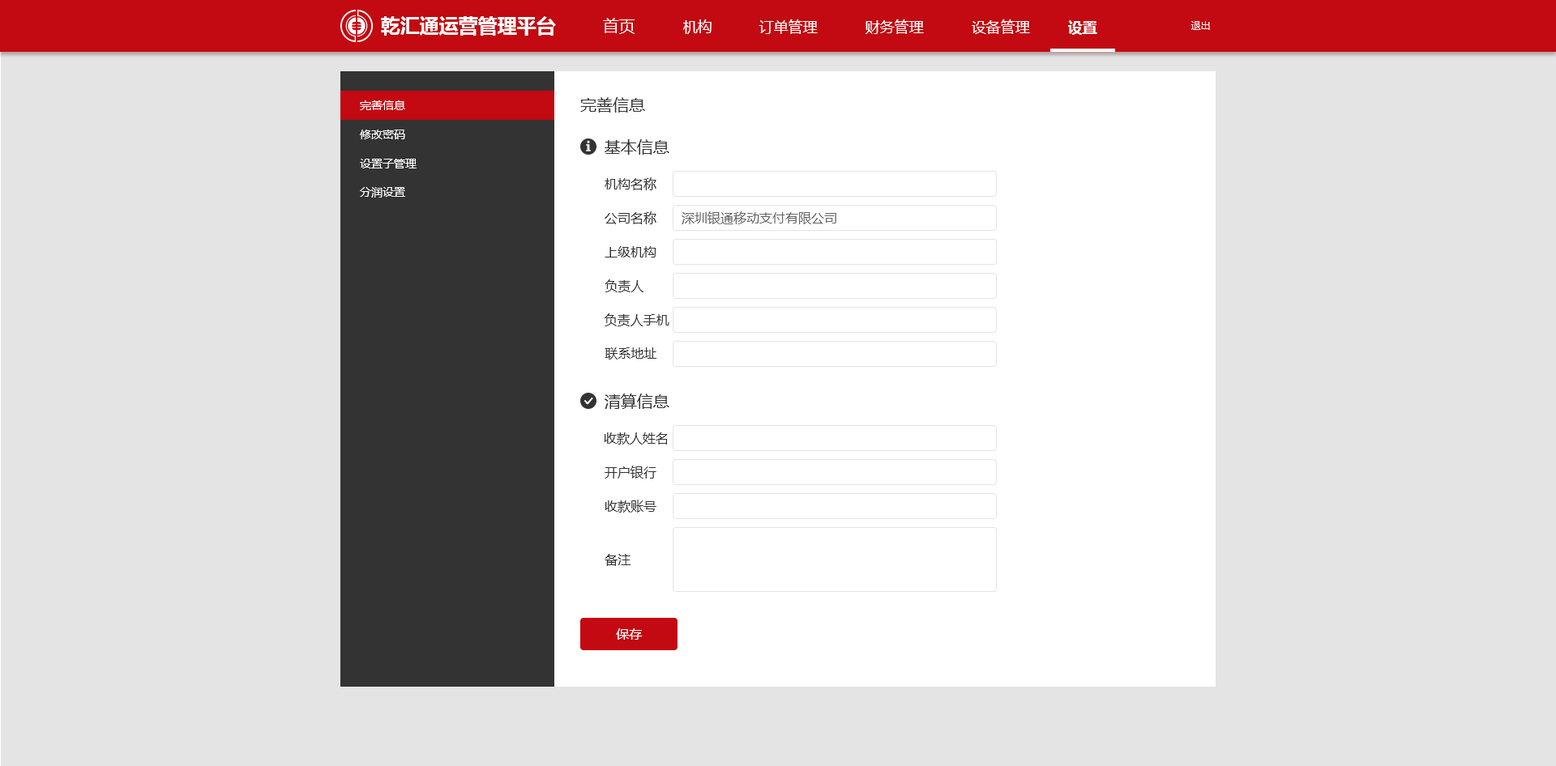
<style>
.page{position:relative;width:1556px;height:766px;background:#e4e4e4}
.page>*{position:absolute;margin:0}
.t1{font:19.4px "MicrosoftYaHei-Bold";color:#ffffff}
.t2{font:16.2px "MicrosoftYaHei";color:#ffffff}
.t3{font:14.6px "MicrosoftYaHei";color:#ffffff}
.t4{font:14.6px "MicrosoftYaHei-Bold";color:#ffffff}
.t5{font:9.7px "MicrosoftYaHei";color:#ffffff}
.t6{font:11.3px "MicrosoftYaHei";color:#ffffff}
.t7{font:16.2px "MicrosoftYaHei";color:#333333}
.t8{font:13px "MicrosoftYaHei";color:#333333}
.t9{font:13px "MicrosoftYaHei";color:#666666}
.t10{font:13px "MicrosoftYaHei";color:#ffffff}
</style>
<div class="page">
<p class="t1" style="left:381px;top:16px;width:175px;height:20px">乾汇通运营管理平台</p>
<p class="t2" style="left:603px;top:18px;width:31px;height:16px">首页</p>
<p class="t3" style="left:683px;top:19px;width:28px;height:15px">机构</p>
<p class="t3" style="left:758px;top:19px;width:60px;height:15px">订单管理</p>
<p class="t3" style="left:865px;top:19px;width:59px;height:15px">财务管理</p>
<p class="t3" style="left:971px;top:19px;width:59px;height:15px">设备管理</p>
<p class="t4" style="left:1068px;top:20px;width:29px;height:15px">设置</p>
<p class="t5" style="left:1190px;top:21px;width:20px;height:9px">退出</p>
<p class="t6" style="left:360px;top:100px;width:45px;height:10px">完善信息</p>
<p class="t7" style="left:580px;top:97px;width:65px;height:16px">完善信息</p>
<p class="t6" style="left:360px;top:130px;width:45px;height:9px">修改密码</p>
<p class="t7" style="left:604px;top:139px;width:65px;height:16px">基本信息</p>
<p class="t6" style="left:360px;top:159px;width:56px;height:10px">设置子管理</p>
<p class="t8" style="left:604px;top:177px;width:52px;height:13px">机构名称</p>
<p class="t6" style="left:360px;top:187px;width:45px;height:11px">分润设置</p>
<p class="t8" style="left:604px;top:211px;width:52px;height:13px">公司名称</p>
<p class="t9" style="left:681px;top:211px;width:155px;height:13px">深圳银通移动支付有限公司</p>
<p class="t8" style="left:604px;top:246px;width:52px;height:12px">上级机构</p>
<p class="t8" style="left:604px;top:280px;width:39px;height:13px">负责人</p>
<p class="t8" style="left:604px;top:314px;width:65px;height:13px">负责人手机</p>
<p class="t8" style="left:604px;top:348px;width:53px;height:12px">联系地址</p>
<p class="t7" style="left:604px;top:394px;width:65px;height:15px">清算信息</p>
<p class="t8" style="left:604px;top:433px;width:64px;height:12px">收款人姓名</p>
<p class="t8" style="left:604px;top:466px;width:52px;height:13px">开户银行</p>
<p class="t8" style="left:604px;top:500px;width:52px;height:13px">收款账号</p>
<p class="t8" style="left:604px;top:554px;width:26px;height:12px">备注</p>
<p class="t10" style="left:616px;top:629px;width:27px;height:11px">保存</p>
</div>
